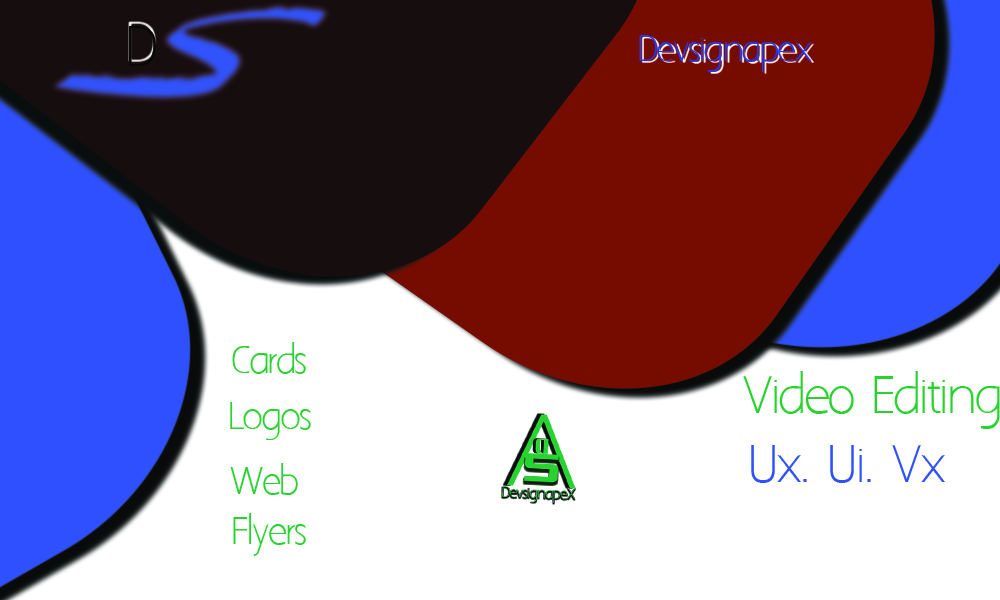
<style>
.page{position:relative;width:1000px;height:600px;background:#ffffff}
.page>*{position:absolute;margin:0}
.t1{font:32.1px "AaarghNormal";letter-spacing:-0.07em;color:#1e36ff}
.t2{font:33.3px "AaarghNormal";letter-spacing:-0.07em;color:#27d32d}
.t3{font:45.9px "AaarghNormal";letter-spacing:-0.07em;color:#27d32d}
.t4{font:45.9px "AaarghNormal";letter-spacing:-0.07em;color:#2f50ff}
</style>
<div class="page">
<p class="t1" style="left:639px;top:35px;width:173px;height:37px">Devsignapex</p>
<p class="t2" style="left:232px;top:342px;width:74px;height:32px">Cards</p>
<p class="t3" style="left:743px;top:371px;width:257px;height:58px">Video Editing</p>
<p class="t2" style="left:230px;top:402px;width:81px;height:38px">Logos</p>
<p class="t4" style="left:751px;top:445px;width:194px;height:38px">Ux. Ui. Vx</p>
<p class="t2" style="left:230px;top:463px;width:68px;height:32px">Web</p>
<p class="t2" style="left:233px;top:513px;width:73px;height:43px">Flyers</p>
</div>
